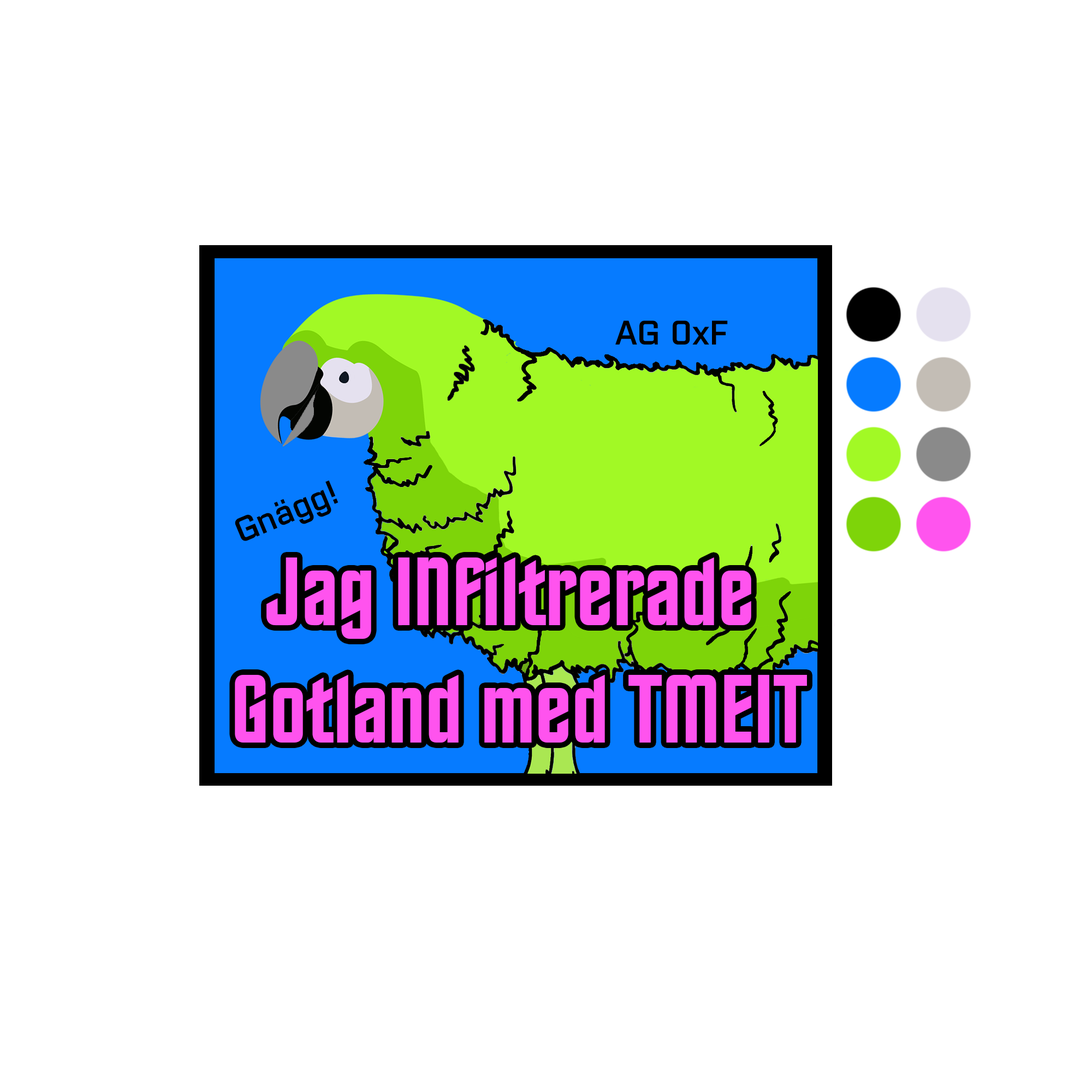
<style>
.page{position:relative;width:1092px;height:1092px;background:#ffffff}
.page>*{position:absolute;margin:0}
.t1{font:34.1px "NJDXKS+Purista-SemiBold*1";color:#000000}
.t2{font:97.8px "HorizonBT-Regular";color:#ff53ee}
</style>
<div class="page">
<p class="t1" style="left:615px;top:320px;width:113px;height:25px">AG 0xF</p>
<p class="t1" style="left:235px;top:480px;width:104px;height:61px;rotate:-23deg">Gnägg!</p>
<p class="t2" style="left:235px;top:557px;width:572px;height:186px;text-align:center">Jag INfiltrerade <br>Gotland med TMEIT</p>
</div>
